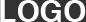
<style>
.page{position:relative;width:86px;height:22px;background:#333333}
.page>*{position:absolute;margin:0}
.t1{font:30px "Helvetica-Bold";color:#ffffff}
</style>
<div class="page">
<p class="t1" style="left:0px;top:0px;width:86px;height:22px">LOGO</p>
</div>
